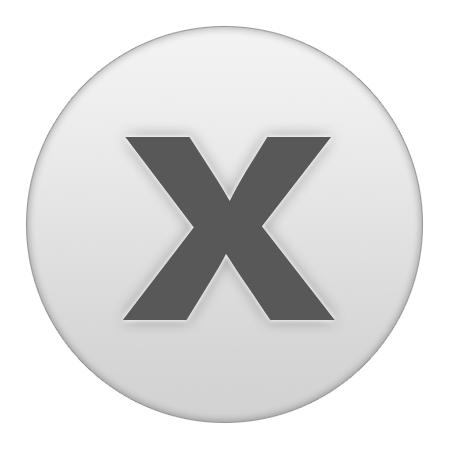
<style>
.page{position:relative;width:450px;height:450px;background:#ffffff}
.page>*{position:absolute;margin:0}
.t1{font:271.2px "MyriadPro-Bold";color:#585858;scale:1.34 1}
</style>
<div class="page">
<p class="t1" style="left:123px;top:137px;width:212px;height:183px">X</p>
</div>
